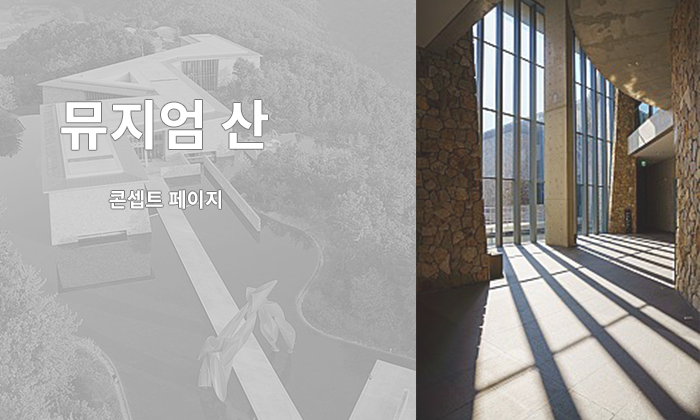
<style>
.page{position:relative;width:700px;height:420px}
.page>*{position:absolute;margin:0}
.t1{font:54px "NotoSansKR-Bold";color:#ffffff}
.t2{font:20px "NotoSansKR-Bold";color:#ffffff}
</style>
<div class="page">
<p class="t1" style="left:61px;top:100px;width:207px;height:50px">뮤지엄 산</p>
<p class="t2" style="left:109px;top:190px;width:112px;height:19px">콘셉트 페이지</p>
</div>
